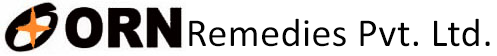
<style>
.page{position:relative;width:497px;height:56px;background:#ffffff}
.page>*{position:absolute;margin:0}
.t1{font:40px "Calibri";letter-spacing:0.01em;color:#030303}
</style>
<div class="page">
<p class="t1" style="left:189px;top:18px;width:301px;height:29px">.Remedies Pvt. Ltd</p>
</div>
